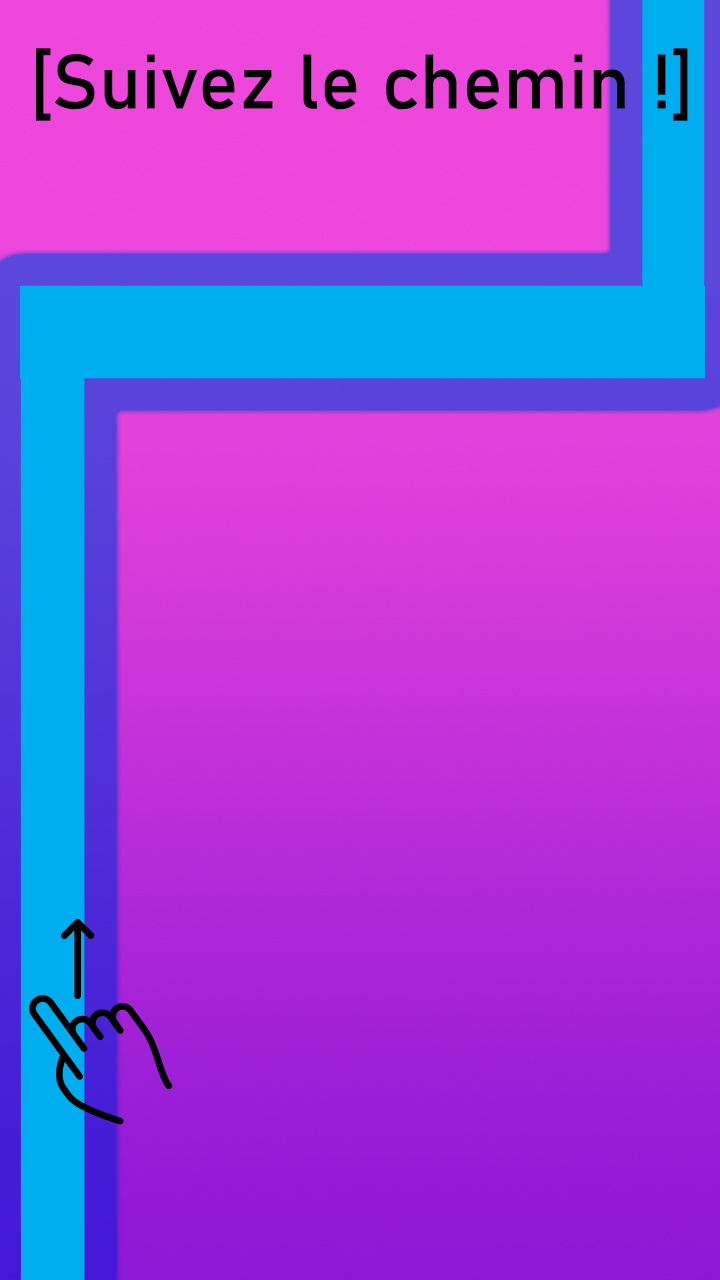
<style>
.page{position:relative;width:720px;height:1280px}
.page>*{position:absolute;margin:0}
.t1{font:129.9px "Bahnschrift";letter-spacing:0.005em;color:#000000}
</style>
<div class="page">
<p class="t1" style="left:36px;top:48px;width:652px;height:73px">[Suivez le chemin !]</p>
</div>
